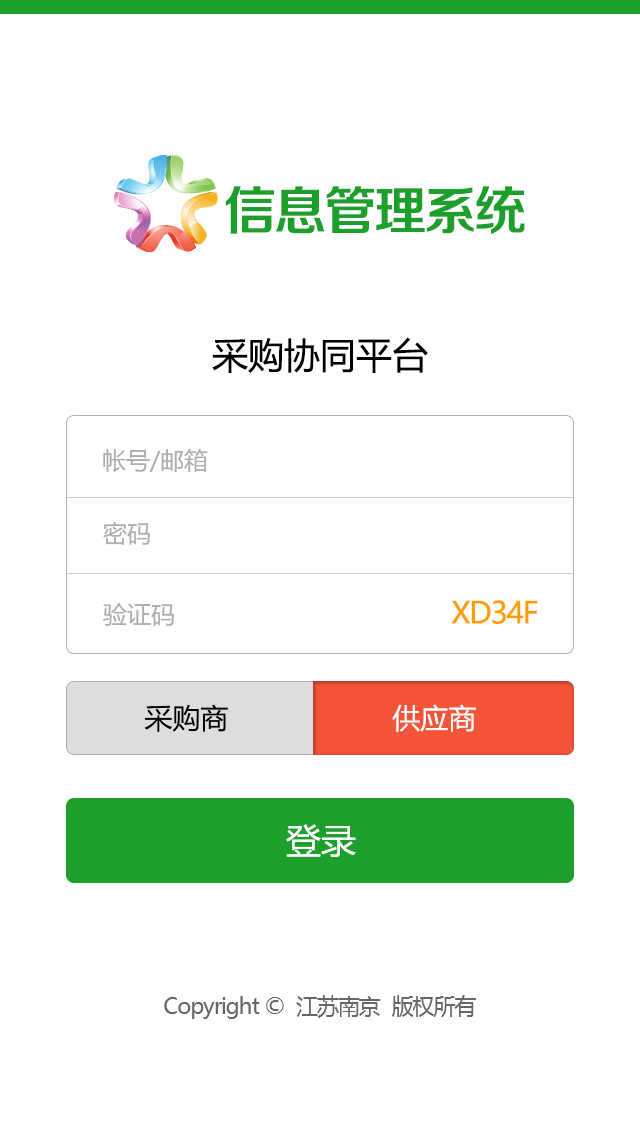
<style>
.page{position:relative;width:640px;height:1136px;background:#ffffff}
.page>*{position:absolute;margin:0}
.t1{font:52.7px "FZZZHONGJW--GB1-0";letter-spacing:-0.05em;color:#1da02b}
.t2{font:36px "MicrosoftYaHei";color:#000000}
.t3{font:24px "MicrosoftYaHei";color:#adadad}
.t4{font:30px "MicrosoftYaHei";letter-spacing:-0.05em;color:#ff9d02}
.t5{font:28px "MicrosoftYaHei";color:#000000}
.t6{font:28px "MicrosoftYaHei";color:#ffffff}
.t7{font:35px "MicrosoftYaHei";color:#ffffff}
.t8{font:22px "MicrosoftYaHei";letter-spacing:-0.05em;color:#676767}
</style>
<div class="page">
<p class="t1" style="left:225px;top:186px;width:300px;height:48px">信息管理系统</p>
<p class="t2" style="left:212px;top:337px;width:216px;height:36px">采购协同平台</p>
<p class="t3" style="left:103px;top:449px;width:105px;height:24px">帐号/邮箱</p>
<p class="t3" style="left:103px;top:522px;width:47px;height:23px">密码</p>
<p class="t3" style="left:103px;top:603px;width:71px;height:23px">验证码</p>
<p class="t4" style="left:451px;top:600px;width:87px;height:24px">XD34F</p>
<p class="t5" style="left:144px;top:704px;width:84px;height:28px">采购商</p>
<p class="t6" style="left:392px;top:704px;width:84px;height:28px">供应商</p>
<p class="t7" style="left:286px;top:824px;width:70px;height:33px">登录</p>
<p class="t8" style="left:164px;top:995px;width:312px;height:24px">Copyright ©  江苏南京  版权所有</p>
</div>
